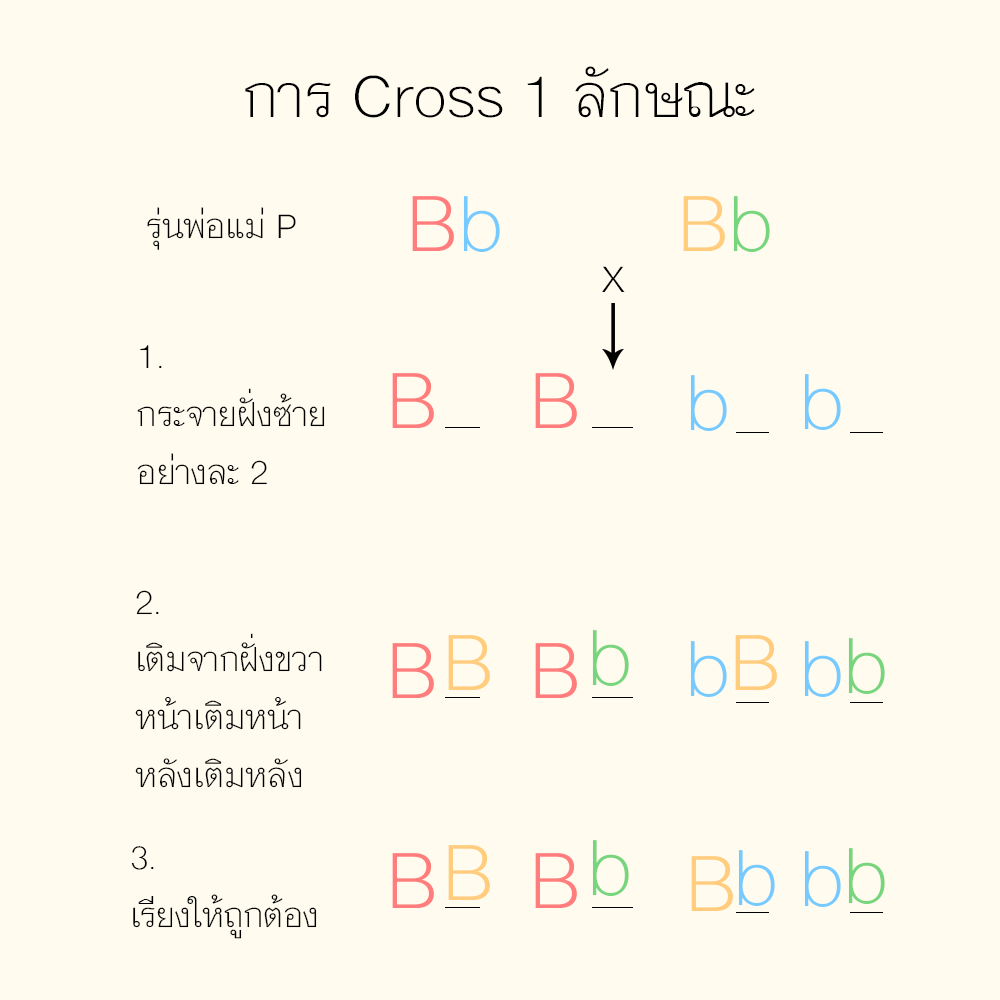
<style>
.page{position:relative;width:1000px;height:1000px;background:#fffcef}
.page>*{position:absolute;margin:0}
.t1{font:84.7px "MNPaethai-Light";color:#000000}
.t2{font:112.9px "MNPaethai-Light";color:#ff7d7d}
.t3{font:112.9px "MNPaethai-Light";color:#76caff}
.t4{font:112.9px "MNPaethai-Light";color:#ffcd7d}
.t5{font:112.9px "MNPaethai-Light";color:#77d57d}
.t6{font:48px "MNPaethai-Light";color:#000000}
.t7{font:72px "MNPaethai-Light";color:#000000}
</style>
<div class="page">
<p class="t1" style="left:245px;top:66px;width:510px;height:52px">การ Cross 1 ลักษณะ</p>
<p class="t2" style="left:412px;top:196px;width:358px;height:56px">B<span class="t3">b       </span><span class="t4">B</span><span class="t5">b</span></p>
<p class="t6" style="left:147px;top:207px;width:149px;height:43px">รุ่นพ่อแม่ P</p>
<p class="t7" style="left:602px;top:266px;width:23px;height:26px">x</p>
<p class="t6" style="left:137px;top:345px;width:188px;height:140px">1.<br>กระจายฝั่งซ้าย<br>อย่างละ 2</p>
<p class="t2" style="left:392px;top:373px;width:42px;height:55px">B</p>
<p class="t2" style="left:535px;top:373px;width:42px;height:55px">B</p>
<p class="t3" style="left:690px;top:375px;width:37px;height:56px">b</p>
<p class="t3" style="left:804px;top:374px;width:37px;height:56px">b</p>
<p class="t6" style="left:135px;top:590px;width:187px;height:198px">2.<br>เติมจากฝั่งขวา<br>หน้าเติมหน้า<br>หลังเติมหลัง</p>
<p class="t5" style="left:592px;top:630px;width:37px;height:56px">b</p>
<p class="t4" style="left:448px;top:635px;width:42px;height:55px">B</p>
<p class="t3" style="left:690px;top:641px;width:37px;height:56px">b</p>
<p class="t4" style="left:735px;top:635px;width:42px;height:55px">B</p>
<p class="t3" style="left:804px;top:641px;width:37px;height:56px">b</p>
<p class="t5" style="left:848px;top:638px;width:37px;height:56px">b</p>
<p class="t2" style="left:392px;top:643px;width:42px;height:55px">B</p>
<p class="t2" style="left:535px;top:643px;width:42px;height:55px">B</p>
<p class="t6" style="left:131px;top:846px;width:186px;height:93px">3. <br>เรียงให้ถูกต้อง</p>
<p class="t4" style="left:448px;top:845px;width:42px;height:55px">B</p>
<p class="t5" style="left:592px;top:840px;width:37px;height:56px">b</p>
<p class="t2" style="left:392px;top:853px;width:42px;height:55px">B</p>
<p class="t2" style="left:535px;top:853px;width:42px;height:55px">B</p>
<p class="t4" style="left:691px;top:856px;width:42px;height:55px">B</p>
<p class="t3" style="left:738px;top:850px;width:37px;height:56px">b</p>
<p class="t3" style="left:804px;top:851px;width:37px;height:56px">b</p>
<p class="t5" style="left:848px;top:848px;width:37px;height:56px">b</p>
</div>
